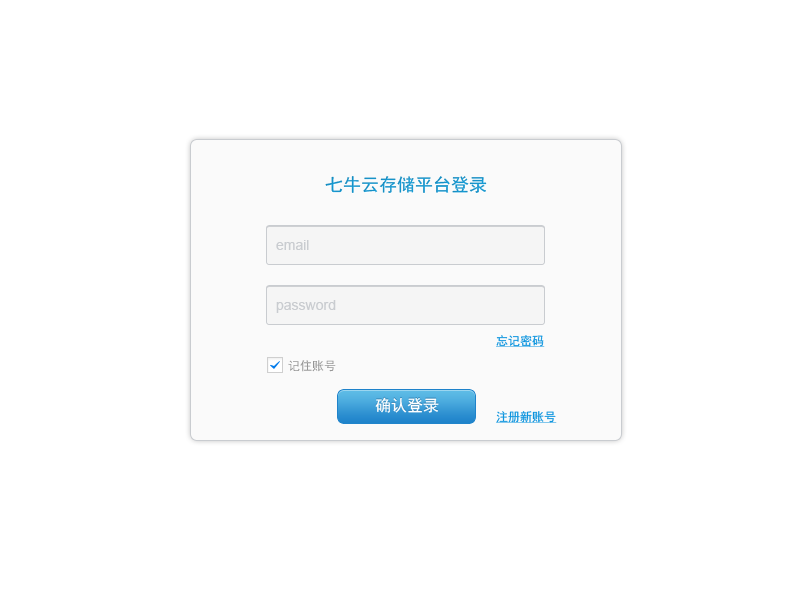
<style>
.page{position:relative;width:800px;height:600px;background:#ffffff}
.page>*{position:absolute;margin:0}
.t1{font:18px "SimHei";color:#1693ca}
.t2{font:14px "ArialMT";color:#c9ccd0}
.t3{font:12px "SimHei";color:#0c94de;text-decoration:underline}
.t4{font:12px "SimHei";color:#969696}
.t5{font:16px "SimHei";color:#ffffff}
</style>
<div class="page">
<p class="t1" style="left:325px;top:176px;width:162px;height:17px">七牛云存储平台登录</p>
<p class="t2" style="left:276px;top:240px;width:33px;height:10px">email</p>
<p class="t2" style="left:276px;top:300px;width:60px;height:13px">password</p>
<p class="t3" style="left:496px;top:335px;width:49px;height:12px">忘记密码</p>
<p class="t4" style="left:288px;top:360px;width:48px;height:12px">记住账号</p>
<p class="t5" style="left:375px;top:397px;width:64px;height:16px">确认登录</p>
<p class="t3" style="left:496px;top:411px;width:61px;height:12px">注册新账号</p>
</div>
